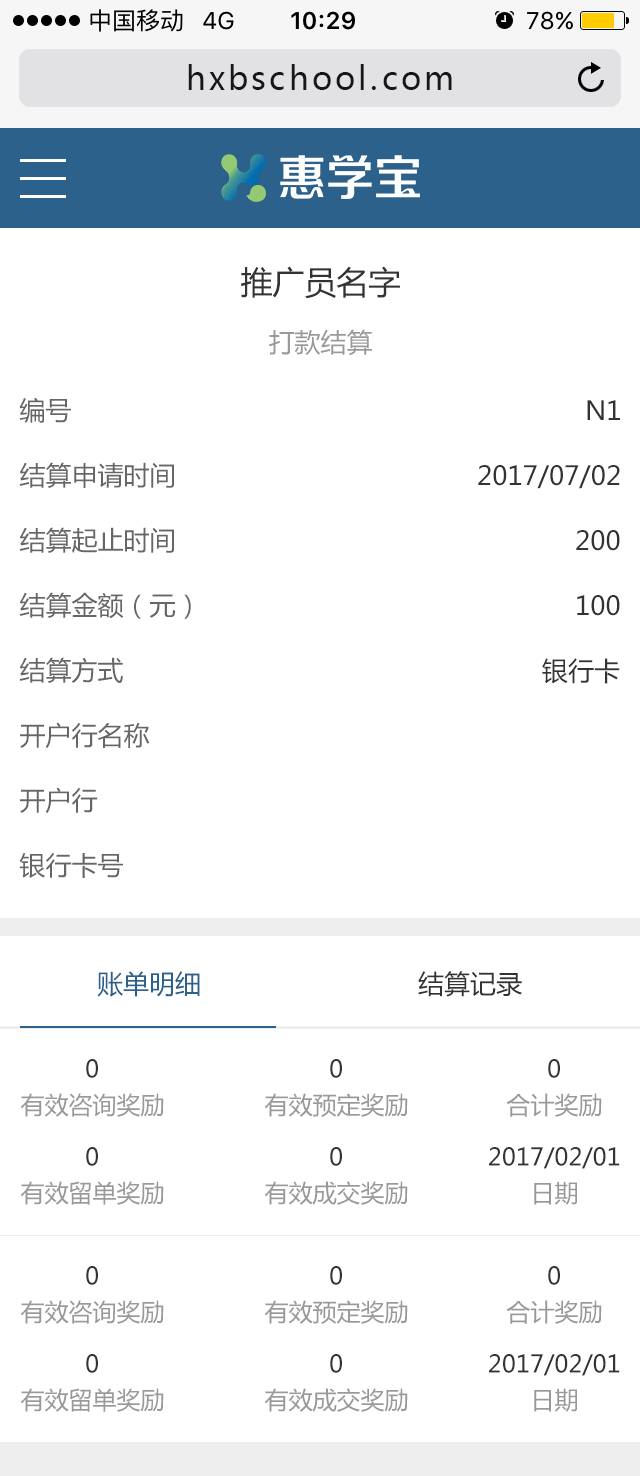
<style>
.page{position:relative;width:640px;height:1476px;background:#ffffff}
.page>*{position:absolute;margin:0}
.t1{font:32px "MicrosoftYaHei";letter-spacing:0.1em;color:#171717}
.t2{font:32px "MicrosoftYaHei";color:#333333}
.t3{font:26px "MicrosoftYaHei";color:#999999}
.t4{font:26px "MicrosoftYaHei";color:#666666}
.t5{font:26px "MicrosoftYaHei";color:#333333}
.t6{font:26px "MicrosoftYaHei";color:#2c618b}
.t7{font:24px/36px "MicrosoftYaHei";color:#999999}
.t8{font:24px/36px "MicrosoftYaHei";color:#333333}
</style>
<div class="page">
<p class="t1" style="left:188px;top:64px;width:264px;height:26px">hxbschool.com</p>
<p class="t2" style="left:241px;top:266px;width:159px;height:33px">推广员名字</p>
<p class="t3" style="left:269px;top:329px;width:103px;height:26px">打款结算</p>
<p class="t4" style="left:19px;top:397px;width:52px;height:26px">编号</p>
<p class="t5" style="left:587px;top:400px;width:33px;height:20px">N1</p>
<p class="t4" style="left:19px;top:462px;width:155px;height:26px">结算申请时间</p>
<p class="t5" style="left:478px;top:465px;width:142px;height:24px">2017/07/02</p>
<p class="t4" style="left:19px;top:527px;width:155px;height:27px">结算起止时间</p>
<p class="t5" style="left:576px;top:530px;width:44px;height:21px">200</p>
<p class="t4" style="left:19px;top:592px;width:172px;height:27px">结算金额（元）</p>
<p class="t5" style="left:577px;top:595px;width:43px;height:21px">100</p>
<p class="t4" style="left:19px;top:657px;width:104px;height:26px">结算方式</p>
<p class="t5" style="left:542px;top:658px;width:78px;height:26px">银行卡</p>
<p class="t4" style="left:20px;top:722px;width:130px;height:27px">开户行名称</p>
<p class="t4" style="left:20px;top:787px;width:78px;height:27px">开户行</p>
<p class="t4" style="left:19px;top:852px;width:104px;height:26px">银行卡号</p>
<p class="t6" style="left:97px;top:971px;width:103px;height:26px">账单明细</p>
<p class="t5" style="left:418px;top:971px;width:104px;height:26px">结算记录</p>
<p class="t7" style="left:20px;top:1059px;width:144px;height:58px;text-align:center"><span class="t8">0<br></span>有效咨询奖励</p>
<p class="t7" style="left:264px;top:1059px;width:144px;height:58px;text-align:center"><span class="t8">0<br></span>有效预定奖励</p>
<p class="t7" style="left:506px;top:1059px;width:96px;height:58px;text-align:center"><span class="t8">0<br></span>合计奖励</p>
<p class="t7" style="left:20px;top:1147px;width:144px;height:58px;text-align:center"><span class="t8">0<br></span>有效留单奖励</p>
<p class="t7" style="left:264px;top:1147px;width:144px;height:58px;text-align:center"><span class="t8">0<br></span>有效成交奖励</p>
<p class="t8" style="left:489px;top:1147px;width:131px;height:58px;text-align:center">2017/02/01<br><span class="t7">日期</span></p>
<p class="t7" style="left:20px;top:1266px;width:144px;height:58px;text-align:center"><span class="t8">0<br></span>有效咨询奖励</p>
<p class="t7" style="left:264px;top:1266px;width:144px;height:58px;text-align:center"><span class="t8">0<br></span>有效预定奖励</p>
<p class="t7" style="left:506px;top:1266px;width:96px;height:58px;text-align:center"><span class="t8">0<br></span>合计奖励</p>
<p class="t7" style="left:20px;top:1354px;width:144px;height:58px;text-align:center"><span class="t8">0<br></span>有效留单奖励</p>
<p class="t7" style="left:264px;top:1354px;width:144px;height:58px;text-align:center"><span class="t8">0<br></span>有效成交奖励</p>
<p class="t8" style="left:489px;top:1354px;width:131px;height:58px;text-align:center">2017/02/01<br><span class="t7">日期</span></p>
</div>
